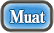
<style>
.page{position:relative;width:54px;height:33px}
.page>*{position:absolute;margin:0}
.t1{font:17px "RyuminPro-ExBold";letter-spacing:-0.08em;color:#ffffff;font-weight:bold;scale:0.9 1}
</style>
<div class="page">
<p class="t1" style="left:10px;top:10px;width:36px;height:13px">Muat</p>
</div>
